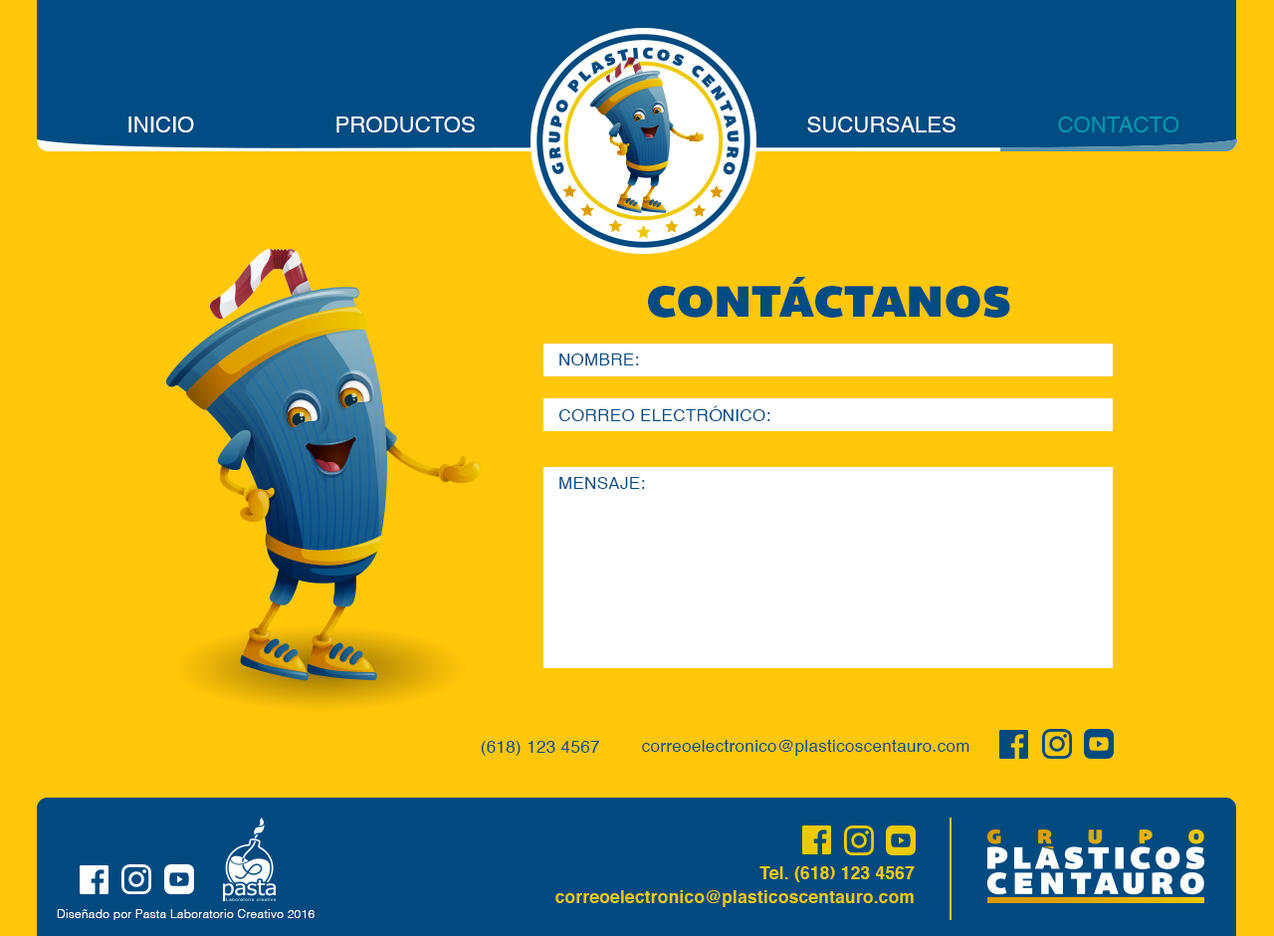
<style>
.page{position:relative;width:1274px;height:936px;background:#ffc709}
.page>*{position:absolute;margin:0}
.t1{font:22.1px "Helvetica";color:#ffffff}
.t2{font:22.1px "Helvetica";color:#0098ae}
.t3{font:44.8px "Bemio";letter-spacing:0.02em;color:#004c83}
.t4{font:16.9px "Helvetica";letter-spacing:0.02em;color:#004c83}
.t5{font:17.1px/23.9px "Helvetica-Bold";letter-spacing:0.02em;color:#eeca00}
.t6{font:11.9px "Helvetica-Light";letter-spacing:0.02em;color:#ffffff}
</style>
<div class="page">
<p class="t1" style="left:128px;top:116px;width:66px;height:16px">INICIO</p>
<p class="t1" style="left:336px;top:116px;width:139px;height:16px">PRODUCTOS</p>
<p class="t1" style="left:807px;top:116px;width:149px;height:16px">SUCURSALES</p>
<p class="t2" style="left:1058px;top:116px;width:122px;height:16px">CONTACTO</p>
<p class="t3" style="left:648px;top:277px;width:362px;height:41px">CONTÁCTANOS</p>
<p class="t4" style="left:559px;top:353px;width:80px;height:12px">NOMBRE:</p>
<p class="t4" style="left:558px;top:405px;width:213px;height:16px">CORREO ELECTRÓNICO:</p>
<p class="t4" style="left:559px;top:477px;width:86px;height:12px">MENSAJE:</p>
<p class="t4" style="left:481px;top:741px;width:118px;height:15px">(618) 123 4567</p>
<p class="t4" style="left:642px;top:740px;width:328px;height:16px">correoelectronico@plasticoscentauro.com</p>
<p class="t5" style="left:555px;top:866px;width:360px;height:41px;text-align:right">Tel. (618) 123 4567<br>correoelectronico@plasticoscentauro.com</p>
<p class="t6" style="left:57px;top:909px;width:258px;height:11px">Diseñado por Pasta Laboratorio Creativo 2016</p>
</div>
